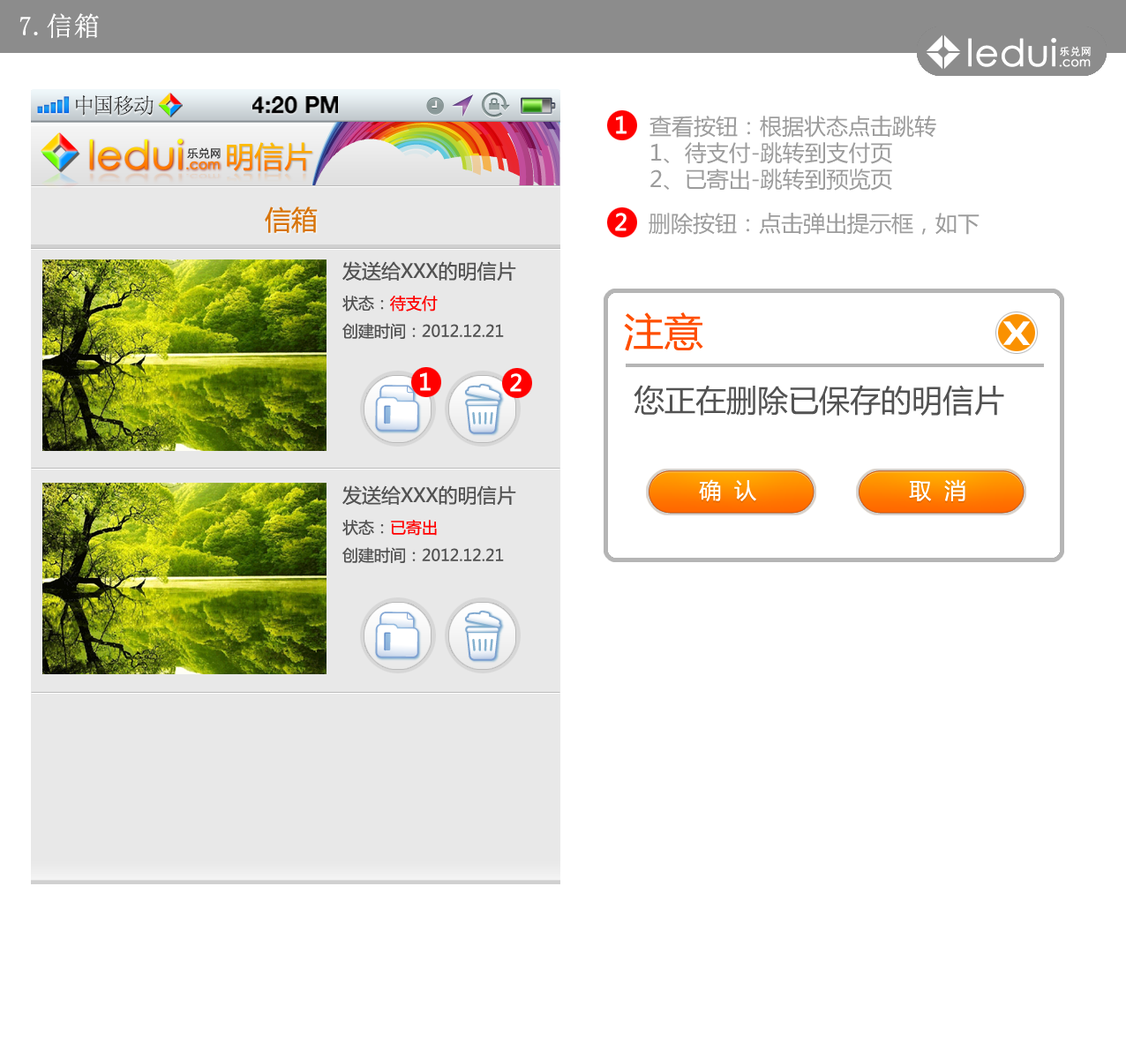
<style>
.page{position:relative;width:1126px;height:1059px;background:#ffffff}
.page>*{position:absolute;margin:0}
.t1{font:26.5px "SimSun";color:#ffffff;font-weight:bold}
.t2{font:21.5px "SimSun";color:#414141}
.t3{font:23.1px "HelveticaNeue-Bold";color:#000000;text-transform:uppercase}
.t4{font:22.1px "MicrosoftYaHei";color:#9c9c9c}
.t5{font:39.5px "CenturyGothic";font-weight:bold}
.t6{font:13.2px "CenturyGothic";font-weight:bold}
.t7{font:10.9px "MicrosoftYaHei";letter-spacing:0.05em;color:#3d3d3d}
.t8{font:29.1px "MicrosoftYaHei"}
.t9{font:23.7px "CenturyGothic";color:#e0d5ce;font-weight:bold;scale:1.67 1}
.t10{font:7.9px "CenturyGothic";color:#e0d5ce;font-weight:bold;scale:1.67 1}
.t11{font:26.5px "MicrosoftYaHei";color:#d7740a}
.t12{font:15.9px "MicrosoftYaHei";color:#525252}
.t13{font:19.4px "MicrosoftYaHei";color:#525252}
.t14{font:15.9px "MicrosoftYaHei";color:#ff0000}
.t15{font:39.7px "MicrosoftYaHei";color:#ff4e00}
.t16{font:35.3px "ç»å¸ç»¼èºä½ç®-regular";color:#ffffff}
.t17{font:30.9px "MicrosoftYaHei";color:#525252}
.t18{font:22.1px "MicrosoftYaHei";color:#ffffff}
</style>
<div class="page">
<p class="t1" style="left:19px;top:13px;width:80px;height:26px">7.信箱</p>
<p class="t2" style="left:76px;top:95px;width:78px;height:21px">中国移动</p>
<p class="t3" style="left:252px;top:96px;width:86px;height:18px">4:20 PM</p>
<p class="t4" style="left:649px;top:116px;width:287px;height:75px">查看按钮：根据状态点击跳转<br>1、待支付-跳转到支付页<br>2、已寄出-跳转到预览页</p>
<p class="t5" style="left:89px;top:139px;width:131px;height:31px">ledui<span class="t6">.com</span></p>
<p class="t7" style="left:187px;top:147px;width:34px;height:12px">乐兑网</p>
<p class="t8" style="left:227px;top:142px;width:85px;height:29px">明信片</p>
<p class="t9" style="left:89px;top:173px;width:131px;height:19px">ledui<span class="t10">.com</span></p>
<p class="t11" style="left:265px;top:206px;width:53px;height:27px">信箱</p>
<p class="t4" style="left:649px;top:213px;width:331px;height:22px">删除按钮：点击弹出提示框，如下</p>
<p class="t12" style="left:342px;top:261px;width:174px;height:78px"><span class="t13">发送给XXX的明信片<br></span>状态：<span class="t14">待支付<br></span>创建时间：2012.12.21</p>
<p class="t15" style="left:624px;top:312px;width:79px;height:39px">注意</p>
<p class="t16" style="left:1002px;top:321px;width:29px;height:24px">X</p>
<p class="t17" style="left:634px;top:385px;width:370px;height:31px">您正在删除已保存的明信片</p>
<p class="t12" style="left:342px;top:485px;width:174px;height:78px"><span class="t13">发送给XXX的明信片<br></span>状态：<span class="t14">已寄出<br></span>创建时间：2012.12.21</p>
<p class="t18" style="left:699px;top:479px;width:57px;height:23px">确  认</p>
<p class="t18" style="left:909px;top:479px;width:56px;height:22px">取  消</p>
</div>
